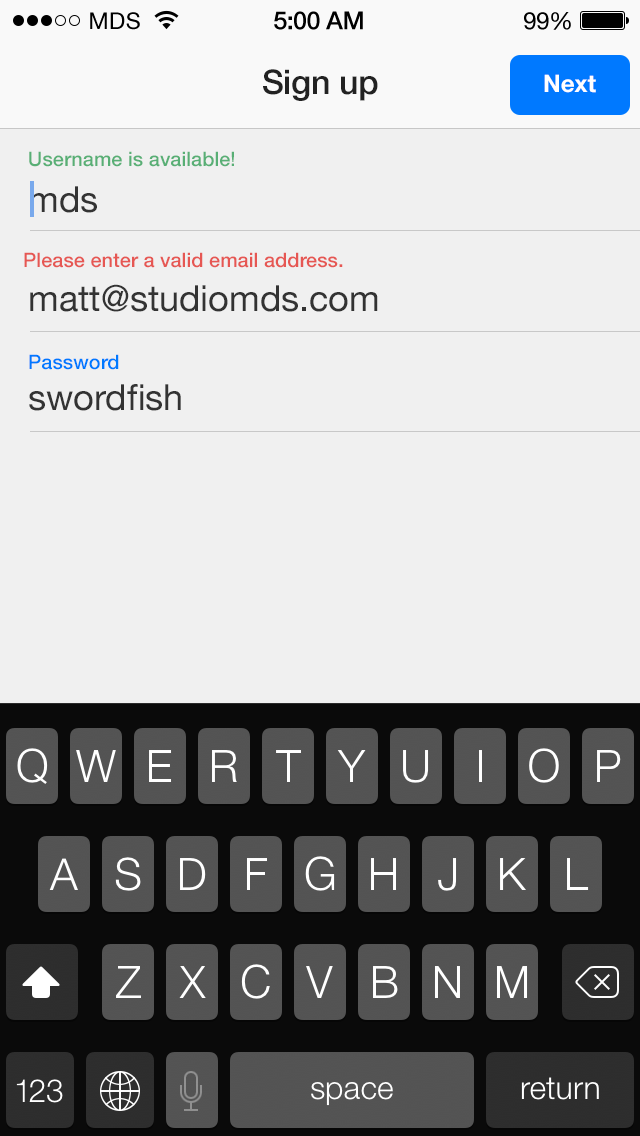
<style>
.page{position:relative;width:640px;height:1136px;background:#f0f0f0}
.page>*{position:absolute;margin:0}
.t1{font:34px "HelveticaNeue-Medium";letter-spacing:-0.015em;color:#222222}
.t2{font:24px "HelveticaNeue-Bold";color:#ffffff}
.t3{font:20px "HelveticaNeue-Medium";color:#58af75}
.t4{font:36px "HelveticaNeue";color:#333333}
.t5{font:20px "HelveticaNeue-Medium";color:#e65753}
.t6{font:20px "HelveticaNeue-Medium";color:#0079ff}
</style>
<div class="page">
<p class="t1" style="left:263px;top:69px;width:115px;height:32px">Sign up</p>
<p class="t2" style="left:544px;top:74px;width:52px;height:19px">Next</p>
<p class="t3" style="left:29px;top:151px;width:205px;height:16px">Username is available!</p>
<p class="t4" style="left:30px;top:186px;width:67px;height:27px">mds</p>
<p class="t5" style="left:24px;top:252px;width:319px;height:16px">Please enter a valid email address.</p>
<p class="t4" style="left:30px;top:284px;width:348px;height:28px">matt@studiomds.com</p>
<p class="t6" style="left:29px;top:354px;width:90px;height:16px">Password</p>
<p class="t4" style="left:29px;top:384px;width:152px;height:27px">swordfish</p>
</div>
